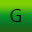
<style>
.page{position:relative;width:32px;height:32px}
.page>*{position:absolute;margin:0}
.t1{font:18px "SegoeUI";color:#000000}
</style>
<div class="page">
<p class="t1" style="left:10px;top:9px;width:11px;height:13px">G</p>
</div>
